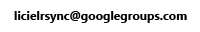
<style>
.page{position:relative;width:200px;height:32px;background:#ffffff}
.page>*{position:absolute;margin:0}
.t1{font:12px "SegoeUI-Bold";color:#000000}
</style>
<div class="page">
<p class="t1" style="left:14px;top:11px;width:173px;height:12px">licielrsync@googlegroups.com</p>
</div>
